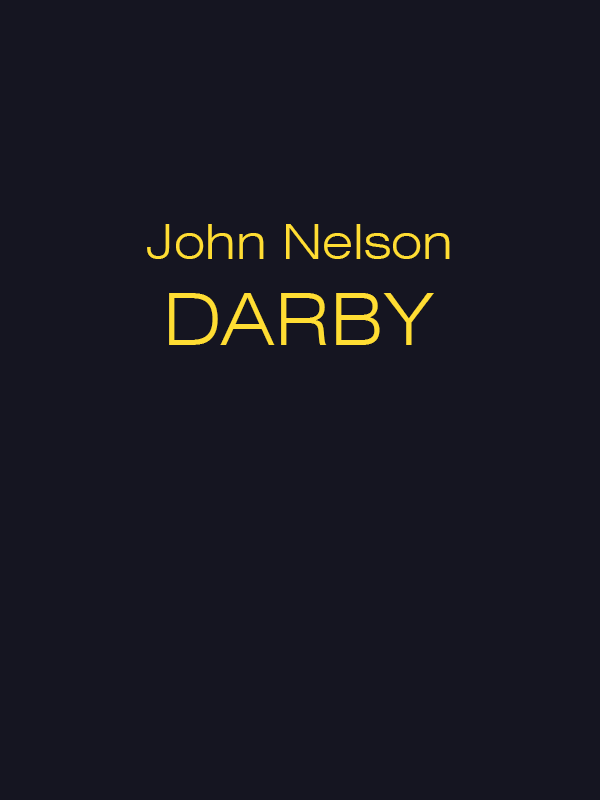
<style>
.page{position:relative;width:600px;height:800px;background:#151521}
.page>*{position:absolute;margin:0}
.t1{font:48px "Swiss721BT-LightExtended";color:#ffdd33}
.t2{font:72px "Swiss721BT-LightExtended";color:#ffdd33}
</style>
<div class="page">
<p class="t1" style="left:147px;top:224px;width:303px;height:121px;text-align:center">John Nelson<br><span class="t2">DARBY</span></p>
</div>
